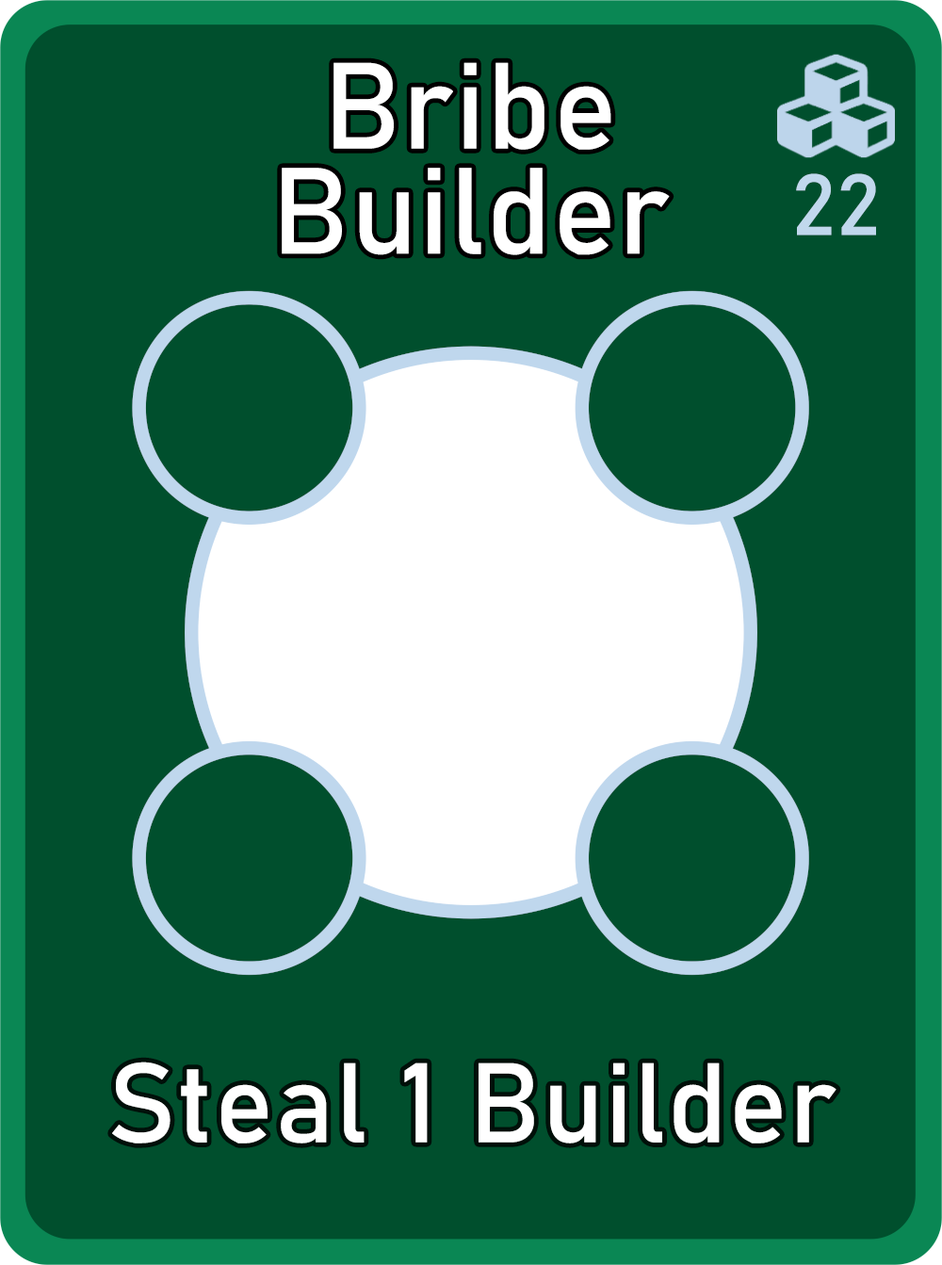
<style>
.page{position:relative;width:942px;height:1265px;background:#004f2d}
.page>*{position:absolute;margin:0}
.t1{font:120.6px/105.1px "Bahnschrift";letter-spacing:0.01em;color:#ffffff}
.t2{font:85px "Bahnschrift";letter-spacing:0.01em;color:#c1d8ed}
.t3{font:111.3px "Bahnschrift";letter-spacing:0.01em;color:#ffffff}
</style>
<div class="page">
<p class="t1" style="left:282px;top:62px;width:388px;height:193px;text-align:center">Bribe<br>Builder</p>
<p class="t2" style="left:796px;top:173px;width:80px;height:63px">22</p>
<p class="t3" style="left:112px;top:1062px;width:725px;height:82px">Steal 1 Builder</p>
</div>
